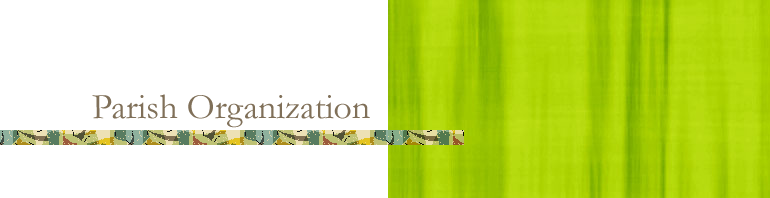
<style>
.page{position:relative;width:770px;height:198px;background:#ffffff}
.page>*{position:absolute;margin:0}
.t1{font:36px "Garamond";color:#807059}
</style>
<div class="page">
<p class="t1" style="left:92px;top:94px;width:278px;height:34px">Parish Organization</p>
</div>
